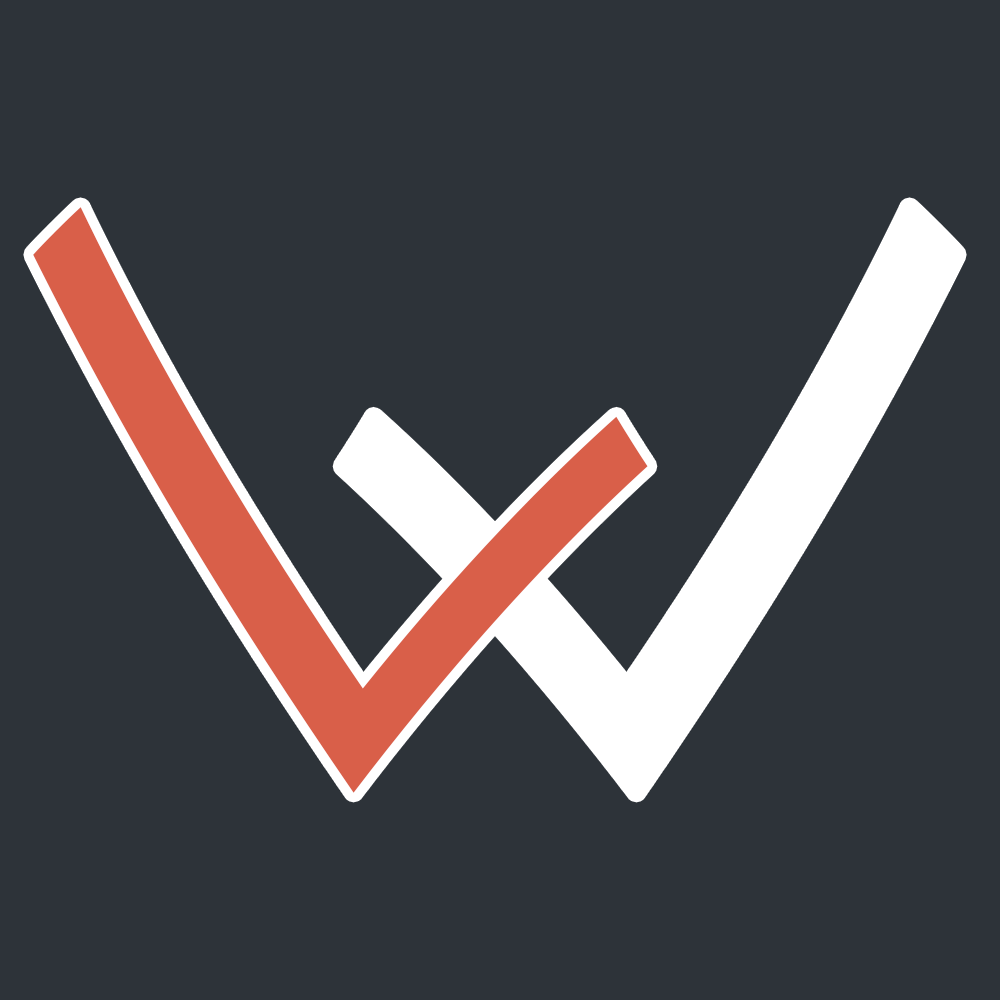
<style>
.page{position:relative;width:1000px;height:1000px;background:#2d3339}
.page>*{position:absolute;margin:0}
.t1{font:838.1px "YuppyTC-Regular";color:#d95f49;font-style:italic;scale:1.1 1}
.t2{font:838.1px "YuppyTC-Regular";color:#ffffff;font-style:italic;scale:1.1 1}
</style>
<div class="page">
<p class="t1" style="left:33px;top:207px;width:615px;height:586px;rotate:-45deg">L</p>
<p class="t2" style="left:342px;top:207px;width:615px;height:586px;rotate:-135deg">L</p>
</div>
